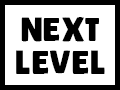
<style>
.page{position:relative;width:120px;height:90px;background:#ffffff}
.page>*{position:absolute;margin:0}
.t1{font:37.5px/33.3px "SuperCorn";letter-spacing:0.04em;color:#000000}
</style>
<div class="page">
<p class="t1" style="left:16px;top:17px;width:89px;height:57px;text-align:center">Next<br>Level</p>
</div>
